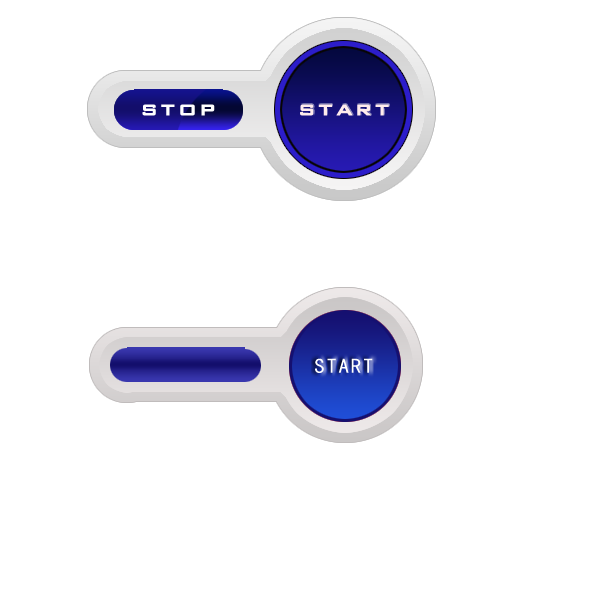
<style>
.page{position:relative;width:600px;height:600px;background:#ffffff}
.page>*{position:absolute;margin:0}
.t1{font:36px "SimHei";letter-spacing:0.08em;color:#ffffff;text-transform:uppercase}
</style>
<div class="page">
<p class="t1" style="left:315px;top:358px;width:58px;height:15px">start</p>
</div>
